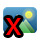
<style>
.page{position:relative;width:40px;height:40px;background:#ffffff}
.page>*{position:absolute;margin:0}
.t1{font:33.9px "MyriadPro-Regular";color:#ff0000}
</style>
<div class="page">
<p class="t1" style="left:6px;top:18px;width:15px;height:17px">x</p>
</div>
